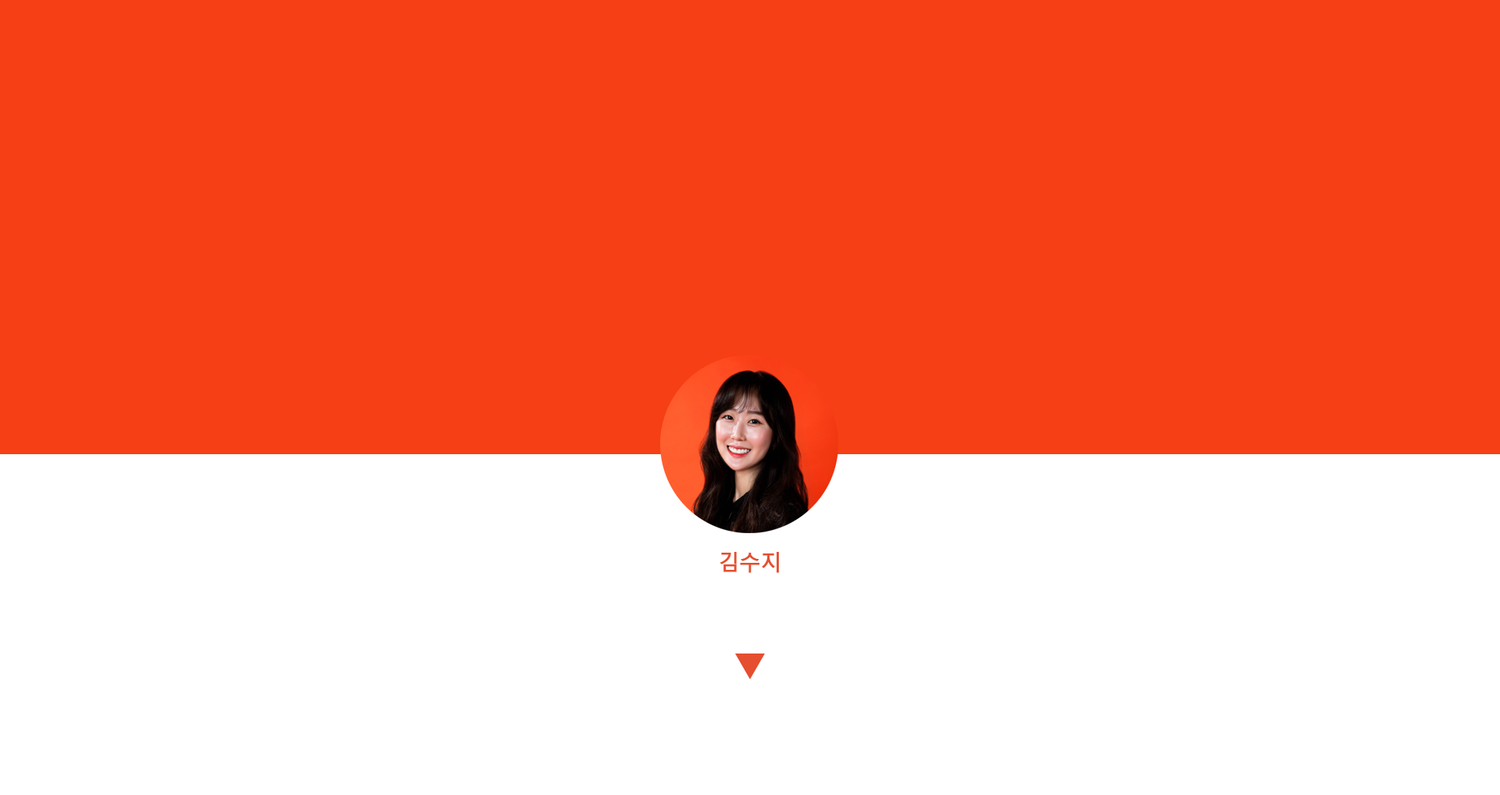
<style>
.page{position:relative;width:1500px;height:795px;background:#f63f14}
.page>*{position:absolute;margin:0}
.t1{font:20.8px "MalgunGothic";color:#e54e2f;font-weight:bold}
</style>
<div class="page">
<p class="t1" style="left:721px;top:552px;width:58px;height:21px">김수지</p>
</div>
